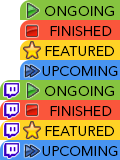
<style>
.page{position:relative;width:120px;height:160px}
.page>*{position:absolute;margin:0}
.t1{font:14px "AvenirNextLTPro-Regular";color:#000000}
.t2{font:14px "AvenirNextLTPro-Regular";color:#010101}
</style>
<div class="page">
<p class="t1" style="left:45px;top:6px;width:69px;height:10px">ONGOING</p>
<p class="t1" style="left:50px;top:26px;width:62px;height:10px">FINISHED</p>
<p class="t2" style="left:45px;top:46px;width:69px;height:10px">FEATURED</p>
<p class="t1" style="left:42px;top:66px;width:76px;height:10px">UPCOMING</p>
<p class="t1" style="left:45px;top:86px;width:69px;height:10px">ONGOING</p>
<p class="t1" style="left:50px;top:106px;width:62px;height:10px">FINISHED</p>
<p class="t2" style="left:45px;top:126px;width:69px;height:10px">FEATURED</p>
<p class="t1" style="left:42px;top:146px;width:76px;height:10px">UPCOMING</p>
</div>
